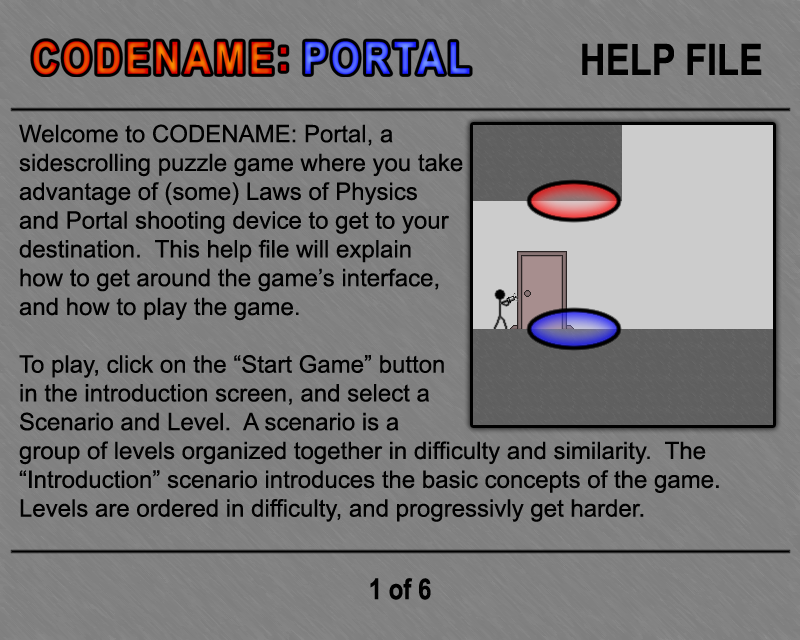
<style>
.page{position:relative;width:800px;height:640px}
.page>*{position:absolute;margin:0}
.t1{font:43.2px "Arial-BoldMT";color:#000000;scale:0.83 1}
.t2{font:24px "ArialMT";color:#000000}
.t3{font:28.8px "Arial-BoldMT";color:#000000;scale:0.83 1}
</style>
<div class="page">
<p class="t1" style="left:582px;top:43px;width:180px;height:32px">HELP FILE</p>
<p class="t2" style="left:19px;top:124px;width:700px;height:398px">Welcome to CODENAME: Portal, a <br>sidescrolling puzzle game where you take<br>advantage of (some) Laws of Physics <br>and Portal shooting device to get to your <br>destination.  This help file will explain <br>how to get around the game’s interface, <br>and how to play the game.<br><br>To play, click on the “Start Game” button <br>in the introduction screen, and select a <br>Scenario and Level.  A scenario is a <br>group of levels organized together in difficulty and similarity.  The “Introduction” scenario introduces the basic concepts of the game.  Levels are ordered in difficulty, and progressivly get harder.</p>
<p class="t3" style="left:370px;top:578px;width:61px;height:22px">1 of 6</p>
</div>
